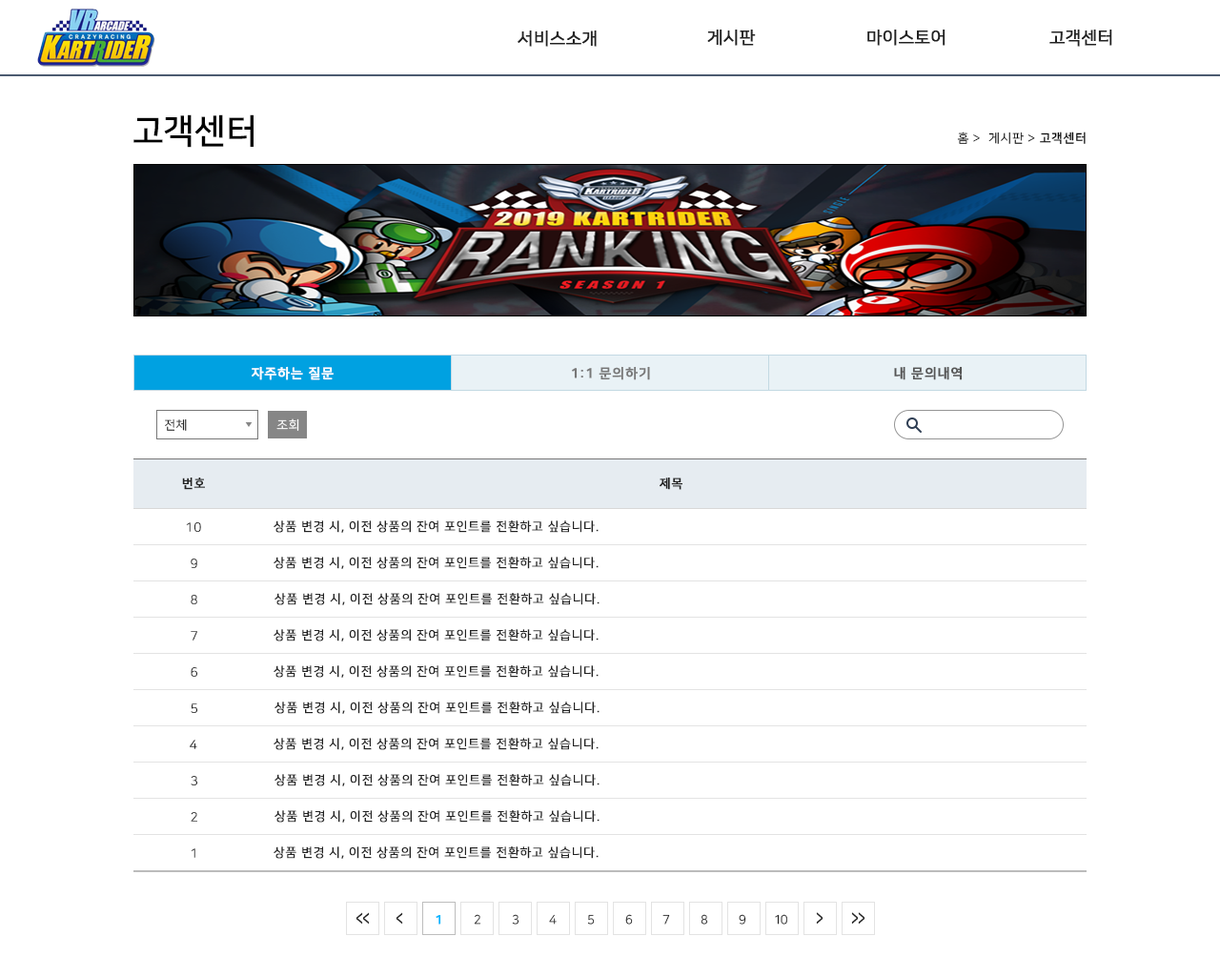
<style>
.page{position:relative;width:1220px;height:977px;background:#ffffff}
.page>*{position:absolute;margin:0}
.t1{font:17.2px "NanumSquareR";color:#222222;font-weight:bold}
.t2{font:34.3px "NanumSquareB";color:#000000}
.t3{font:12.4px "NanumSquareR";letter-spacing:0.05em;color:#000000}
.t4{font:12.4px "NanumSquareL";letter-spacing:0.05em;color:#000000}
.t5{font:12.4px "NanumSquareB";letter-spacing:0.05em;color:#000000}
.t6{font:13.3px "NanumSquareB";letter-spacing:0.05em;color:#ffffff;font-weight:bold}
.t7{font:13.3px "NanumSquareB";letter-spacing:0.05em;color:#777777;font-weight:bold}
.t8{font:13.3px "NanumSquareB";letter-spacing:0.05em;color:#555555;font-weight:bold}
.t9{font:12.4px "NanumSquareR";letter-spacing:0.05em;color:#222222}
.t10{font:12.4px "NanumSquareR";letter-spacing:0.05em;color:#ffffff}
.t11{font:12.4px "NanumSquareB";letter-spacing:0.05em;color:#222222;text-transform:uppercase;font-weight:bold}
.t12{font:12.4px "NanumSquareR";letter-spacing:0.05em;color:#222222;text-transform:uppercase;font-weight:bold}
.t13{font:12.4px "NanumSquareL";letter-spacing:0.05em;color:#222222;text-transform:uppercase;font-weight:bold}
.t14{font:12.4px "NanumSquareL";letter-spacing:0.05em;text-transform:uppercase;font-weight:bold}
.t15{font:19.5px "NanumSquareB";letter-spacing:-0.075em;color:#222222;scale:0.63 1}
.t16{font:12.4px "NanumSquareB";letter-spacing:-0.075em;color:#00b6ff;font-weight:bold}
.t17{font:12.4px "NanumSquareR";letter-spacing:-0.075em}
.t18{font:12.4px "NanumSquareR";letter-spacing:-0.075em;color:#222222}
.t19{font:20.1px "NanumSquareB";letter-spacing:-0.075em;color:#222222;scale:0.61 1}
</style>
<div class="page">
<p class="t1" style="left:518px;top:30px;width:79px;height:17px">서비스소개</p>
<p class="t1" style="left:707px;top:29px;width:49px;height:17px">게시판</p>
<p class="t1" style="left:868px;top:29px;width:78px;height:17px">마이스토어</p>
<p class="t1" style="left:1050px;top:29px;width:63px;height:17px">고객센터</p>
<p class="t2" style="left:133px;top:114px;width:121px;height:34px">고객센터</p>
<p class="t3" style="left:957px;top:132px;width:129px;height:13px">홈 <span class="t4">&gt; </span> 게시판 &gt; <span class="t5">고객센터</span></p>
<p class="t6" style="left:252px;top:366px;width:82px;height:14px">자주하는 질문</p>
<p class="t7" style="left:572px;top:366px;width:78px;height:14px">1:1 문의하기</p>
<p class="t8" style="left:894px;top:366px;width:69px;height:14px">내 문의내역</p>
<p class="t9" style="left:165px;top:419px;width:22px;height:12px">전체</p>
<p class="t10" style="left:276px;top:419px;width:23px;height:12px">조회</p>
<p class="t11" style="left:182px;top:478px;width:23px;height:12px">번호</p>
<p class="t11" style="left:660px;top:478px;width:23px;height:12px">제목</p>
<p class="t12" style="left:274px;top:521px;width:325px;height:12px">상품 변경 시, 이전 상품의 잔여 포인트를 전환하고 싶습니다.</p>
<p class="t13" style="left:186px;top:522px;width:15px;height:10px">10</p>
<p class="t12" style="left:274px;top:557px;width:325px;height:12px">상품 변경 시, 이전 상품의 잔여 포인트를 전환하고 싶습니다.</p>
<p class="t13" style="left:191px;top:559px;width:6px;height:9px">9</p>
<p class="t12" style="left:275px;top:593px;width:325px;height:12px">상품 변경 시, 이전 상품의 잔여 포인트를 전환하고 싶습니다.</p>
<p class="t14" style="left:191px;top:595px;width:6px;height:9px">8</p>
<p class="t12" style="left:274px;top:629px;width:325px;height:13px">상품 변경 시, 이전 상품의 잔여 포인트를 전환하고 싶습니다.</p>
<p class="t13" style="left:191px;top:631px;width:6px;height:10px">7</p>
<p class="t12" style="left:274px;top:665px;width:325px;height:13px">상품 변경 시, 이전 상품의 잔여 포인트를 전환하고 싶습니다.</p>
<p class="t13" style="left:191px;top:667px;width:6px;height:10px">6</p>
<p class="t12" style="left:275px;top:702px;width:325px;height:12px">상품 변경 시, 이전 상품의 잔여 포인트를 전환하고 싶습니다.</p>
<p class="t13" style="left:191px;top:704px;width:6px;height:9px">5</p>
<p class="t12" style="left:274px;top:738px;width:325px;height:12px">상품 변경 시, 이전 상품의 잔여 포인트를 전환하고 싶습니다.</p>
<p class="t13" style="left:190px;top:740px;width:7px;height:9px">4</p>
<p class="t13" style="left:191px;top:776px;width:6px;height:10px">3</p>
<p class="t12" style="left:275px;top:774px;width:325px;height:13px">상품 변경 시, 이전 상품의 잔여 포인트를 전환하고 싶습니다.</p>
<p class="t13" style="left:191px;top:812px;width:6px;height:10px">2</p>
<p class="t12" style="left:275px;top:810px;width:325px;height:13px">상품 변경 시, 이전 상품의 잔여 포인트를 전환하고 싶습니다.</p>
<p class="t14" style="left:191px;top:848px;width:4px;height:10px">1</p>
<p class="t12" style="left:274px;top:847px;width:325px;height:12px">상품 변경 시, 이전 상품의 잔여 포인트를 전환하고 싶습니다.</p>
<p class="t15" style="left:356px;top:912px;width:14px;height:13px">&lt;&lt;</p>
<p class="t15" style="left:396px;top:912px;width:7px;height:13px">&lt;</p>
<p class="t16" style="left:436px;top:914px;width:5px;height:11px">1</p>
<p class="t17" style="left:474px;top:914px;width:7px;height:11px">2</p>
<p class="t18" style="left:512px;top:914px;width:8px;height:11px">3</p>
<p class="t17" style="left:549px;top:914px;width:8px;height:11px">4</p>
<p class="t17" style="left:587px;top:914px;width:8px;height:11px">5</p>
<p class="t17" style="left:625px;top:914px;width:8px;height:11px">6</p>
<p class="t18" style="left:663px;top:914px;width:7px;height:11px">7</p>
<p class="t17" style="left:701px;top:914px;width:7px;height:11px">8</p>
<p class="t18" style="left:739px;top:914px;width:7px;height:11px">9</p>
<p class="t18" style="left:775px;top:914px;width:12px;height:11px">10</p>
<p class="t19" style="left:816px;top:912px;width:8px;height:13px;rotate:180deg">&lt;</p>
<p class="t19" style="left:851px;top:912px;width:15px;height:13px;rotate:180deg">&lt;&lt;</p>
</div>
